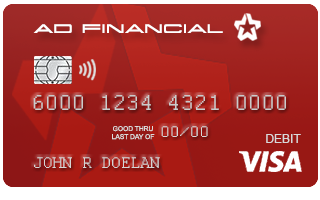
<style>
.page{position:relative;width:320px;height:200px}
.page>*{position:absolute;margin:0}
.t1{font:8.7px "Grandissimo";color:#ffffff}
.t2{font:24px "Courier";color:#cbcbcb}
.t3{font:6.7px "ArialMT";color:#dcdcdc}
.t4{font:17.3px "Courier";color:#d7d7d7}
.t5{font:12px "ArialMT";color:#d9d9d9}
.t6{font:17.3px "Courier";color:#d5d5d5}
</style>
<div class="page">
<p class="t1" style="left:33px;top:24px;width:190px;height:9px">AD FINANCIAL</p>
<p class="t2" style="left:33px;top:95px;width:253px;height:15px">6000 1234 4321 0000</p>
<p class="t3" style="left:112px;top:126px;width:43px;height:14px;text-align:center">GOOD THRU<br>LAST DAY OF</p>
<p class="t4" style="left:161px;top:126px;width:47px;height:11px">00/00</p>
<p class="t5" style="left:266px;top:134px;width:35px;height:9px">DEBIT</p>
<p class="t6" style="left:34px;top:157px;width:126px;height:11px">JOHN R DOELAN</p>
</div>
